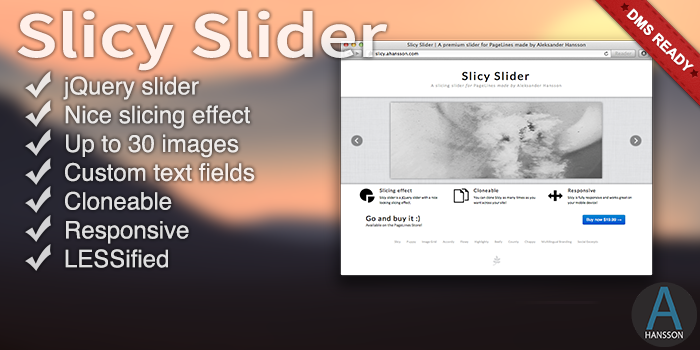
<style>
.page{position:relative;width:700px;height:350px}
.page>*{position:absolute;margin:0}
.t1{font:65px "SourceSansPro-Semibold";color:#ffffff;scale:1.2 1}
.t2{font:14px "Arial-BoldMT";color:#ffffff;text-transform:uppercase}
.t3{font:24px "Helvetica";color:#ebe9e9}
</style>
<div class="page">
<p class="t1" style="left:17px;top:10px;width:370px;height:61px;opacity:0.8">Slicy Slider</p>
<p class="t2" style="left:626px;top:8px;width:68px;height:63px;rotate:44deg">DMS Ready</p>
<p class="t3" style="left:63px;top:76px;width:192px;height:192px">jQuery slider<br>Nice slicing effect<br>Up to 30 images<br>Custom text fields<br>Cloneable<br>Responsive<br>LESSified</p>
</div>
